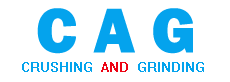
<style>
.page{position:relative;width:230px;height:82px;background:#ffffff}
.page>*{position:absolute;margin:0}
.t1{font:65.3px "FranklinGothic-Heavy";color:#04a3ed}
.t2{font:18px "System";color:#04a3ed}
.t3{font:18px "System";color:#ed0414}
</style>
<div class="page">
<p class="t1" style="left:37px;top:8px;width:156px;height:46px">C A G</p>
<p class="t2" style="left:22px;top:62px;width:182px;height:10px">CRUSHING  <span class="t3">AND</span>  GRINDING</p>
</div>
